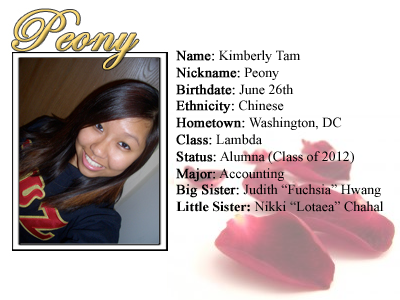
<style>
.page{position:relative;width:400px;height:300px;background:#ffffff}
.page>*{position:absolute;margin:0}
.t1{font:14px "TimesNewRomanPSMT";color:#000000}
.t2{font:14px "TimesNewRomanPSMT";color:#000000;font-weight:bold}
.t3{font:14px "TimesNewRomanPS-BoldMT";color:#000000}
</style>
<div class="page">
<p class="t1" style="left:176px;top:50px;width:208px;height:162px"><span class="t2">Name:</span> Kimberly Tam<br><span class="t2">Nickname:</span> Peony<br><span class="t2">Birthdate:</span> June 26th<br><span class="t2">Ethnicity:</span> Chinese<br><span class="t2">Hometown:</span> Washington, DC<br><span class="t2">Class:</span> Lambda<br><span class="t2">Status:</span> Alumna (Class of 2012)<br><span class="t2">Major:</span> Accounting<br><span class="t2">Big Sister: </span>Judith “Fuchsia” Hwang<br><span class="t3">Little Sister: </span>Nikki “Lotaea” Chahal</p>
</div>
